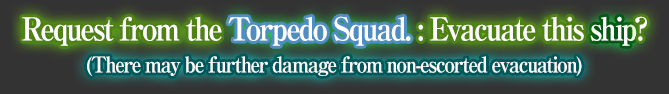
<style>
.page{position:relative;width:669px;height:94px;background:#333333}
.page>*{position:absolute;margin:0}
.t1{font:32px "RyuminPro-ExBold";letter-spacing:-0.08em;color:#ffffff;scale:0.9 1}
.t2{font:22px "RyuminPro-ExBold";letter-spacing:-0.08em;color:#ffffff;scale:0.9 1}
</style>
<div class="page">
<p class="t1" style="left:22px;top:16px;width:625px;height:30px">Request from the Torpedo Squad. : Evacuate this ship?</p>
<p class="t1" style="left:22px;top:16px;width:625px;height:30px">Request from the Torpedo Squad. : Evacuate this ship?</p>
<p class="t1" style="left:22px;top:16px;width:625px;height:30px">Request from the Torpedo Squad. : Evacuate this ship?</p>
<p class="t2" style="left:87px;top:56px;width:495px;height:20px">(There may be further damage from non-escorted evacuation)</p>
</div>
